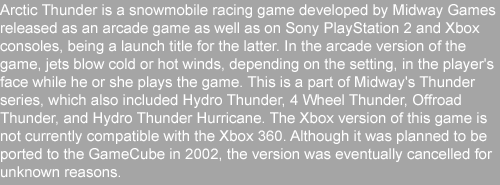
<style>
.page{position:relative;width:500px;height:185px;background:#a5a5a5}
.page>*{position:absolute;margin:0}
.t1{font:15px "ArialMT";color:#ffffff}
</style>
<div class="page">
<p class="t1" style="left:0px;top:4px;width:496px;height:174px">Arctic Thunder is a snowmobile racing game developed by Midway Games released as an arcade game as well as on Sony PlayStation 2 and Xbox consoles, being a launch title for the latter. In the arcade version of the game, jets blow cold or hot winds, depending on the setting, in the player's face while he or she plays the game. This is a part of Midway's Thunder series, which also included Hydro Thunder, 4 Wheel Thunder, Offroad Thunder, and Hydro Thunder Hurricane. The Xbox version of this game is not currently compatible with the Xbox 360. Although it was planned to be ported to the GameCube in 2002, the version was eventually cancelled for unknown reasons.</p>
</div>
